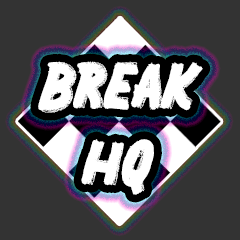
<style>
.page{position:relative;width:240px;height:240px;background:#333333}
.page>*{position:absolute;margin:0}
.t1{font:64px "THANKYOUKOBE";color:#ffffff}
</style>
<div class="page">
<p class="t1" style="left:38px;top:61px;width:165px;height:134px;text-align:center">Break<br>HQ</p>
</div>
